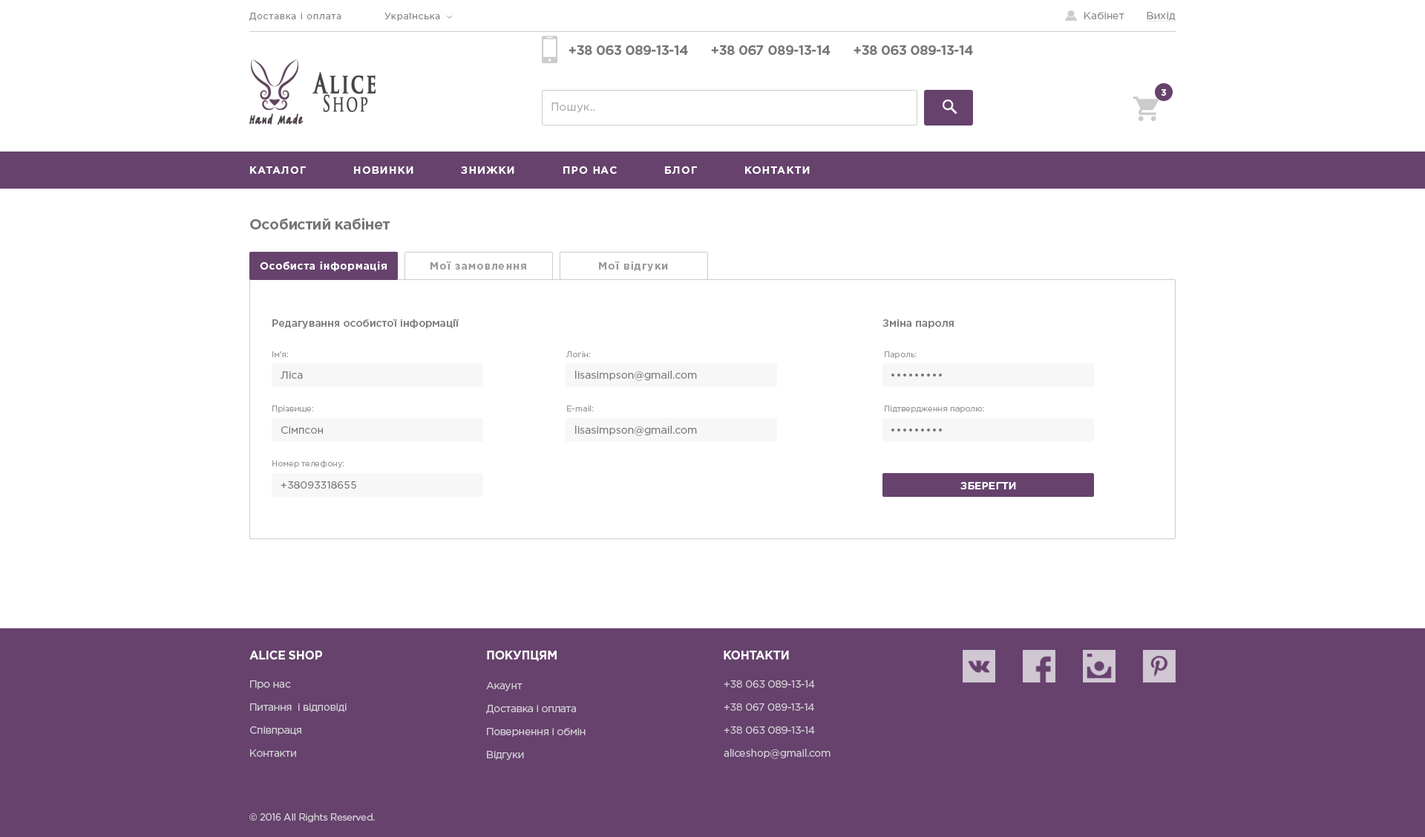
<style>
.page{position:relative;width:1425px;height:837px;background:#ffffff}
.page>*{position:absolute;margin:0}
.t1{font:8.9px "GothamPro";letter-spacing:0.075em;color:#888888}
.t2{font:10.4px "GothamPro";color:#888888}
.t3{font:10.4px "GothamPro";color:#888888;text-decoration:underline}
.t4{font:13.4px/18.6px "GothamPro-Bold";letter-spacing:-0.025em;color:#777777}
.t5{font:13.4px/18.6px "GothamPro";letter-spacing:-0.025em;color:#777777}
.t6{font:27.3px/18.2px "TrajanPro-Bold";letter-spacing:0.1em;color:#494249;font-weight:bold;scale:0.67 1}
.t7{font:21.9px/18.2px "TrajanPro-Regular";letter-spacing:0.1em;color:#494249;font-weight:bold;scale:0.67 1}
.t8{font:8.9px "GothamPro-Bold";letter-spacing:0.01em;color:#ffffff;text-transform:uppercase}
.t9{font:12.6px "TagirCTT";letter-spacing:0.1em;color:#463c45;font-weight:bold;scale:0.65 1}
.t10{font:11.1px "GothamPro";letter-spacing:0.01em;color:#aaaaaa}
.t11{font:10.4px "GothamPro-Bold";letter-spacing:0.075em;color:#ffffff;text-transform:uppercase}
.t12{font:14.8px "GothamPro-Bold";letter-spacing:-0.025em;color:#777777}
.t13{font:10.4px "GothamPro-Bold";letter-spacing:0.05em;color:#fffefe}
.t14{font:10.4px "GothamPro-Bold";letter-spacing:0.075em;color:#999999}
.t15{font:10.4px "GothamPro-Medium";color:#777777}
.t16{font:8.2px "GothamPro";color:#999999}
.t17{font:10.4px "GothamPro";color:#777777}
.t18{font:10.4px "GothamPro-Bold";color:#fefefe;text-transform:uppercase}
.t19{font:11.9px "GothamPro-Bold";letter-spacing:-0.025em;color:#fafafa;text-transform:uppercase}
.t20{font:10.4px/15.6px "GothamPro";letter-spacing:-0.025em;color:#d4ced6}
.t21{font:9.7px "GothamPro";letter-spacing:-0.025em;color:#d4ced6}
</style>
<div class="page">
<p class="t1" style="left:249px;top:13px;width:92px;height:8px">Доставка і оплата</p>
<p class="t1" style="left:385px;top:13px;width:55px;height:8px">Українська</p>
<p class="t2" style="left:1085px;top:12px;width:40px;height:7px">Кабінет</p>
<p class="t3" style="left:1146px;top:12px;width:30px;height:10px">Вихід</p>
<p class="t4" style="left:569px;top:45px;width:119px;height:10px">+38 063 089-13-14<span class="t5"> <br>е</span></p>
<p class="t4" style="left:711px;top:45px;width:120px;height:10px">+38 067 089-13-14<span class="t5"> <br>е</span></p>
<p class="t4" style="left:854px;top:45px;width:119px;height:10px">+38 063 089-13-14<span class="t5"> <br>е</span></p>
<p class="t6" style="left:313px;top:72px;width:63px;height:40px">Alice<br> <span class="t7">Shop</span></p>
<p class="t8" style="left:1161px;top:89px;width:6px;height:7px">3</p>
<p class="t9" style="left:249px;top:114px;width:54px;height:11px">Hand Made</p>
<p class="t10" style="left:552px;top:102px;width:43px;height:11px">Пошук..</p>
<p class="t11" style="left:250px;top:166px;width:56px;height:8px">каталог</p>
<p class="t11" style="left:354px;top:166px;width:59px;height:8px">Новинки</p>
<p class="t11" style="left:461px;top:166px;width:53px;height:8px">Знижки</p>
<p class="t11" style="left:563px;top:166px;width:54px;height:8px">Про нас</p>
<p class="t11" style="left:665px;top:166px;width:32px;height:8px">Блог</p>
<p class="t11" style="left:745px;top:166px;width:65px;height:8px">Контакти</p>
<p class="t12" style="left:250px;top:218px;width:140px;height:11px">Особистий кабінет</p>
<p class="t13" style="left:260px;top:261px;width:127px;height:10px">Особиста інформація</p>
<p class="t14" style="left:431px;top:261px;width:95px;height:8px">Мої замовлення</p>
<p class="t14" style="left:599px;top:261px;width:69px;height:10px">Мої відгуки</p>
<p class="t15" style="left:272px;top:319px;width:187px;height:10px">Редагування особистої інформації</p>
<p class="t15" style="left:883px;top:319px;width:71px;height:9px">Зміна пароля</p>
<p class="t16" style="left:272px;top:351px;width:16px;height:6px">Ім’я:</p>
<p class="t16" style="left:566px;top:351px;width:25px;height:6px">Логін:</p>
<p class="t16" style="left:885px;top:351px;width:32px;height:8px">Пароль:</p>
<p class="t17" style="left:281px;top:371px;width:22px;height:8px">Ліса</p>
<p class="t17" style="left:575px;top:370px;width:122px;height:11px">lisasimpson@gmail.com</p>
<p class="t16" style="left:272px;top:405px;width:41px;height:8px">Прізвище:</p>
<p class="t16" style="left:567px;top:405px;width:27px;height:6px">E-mail:</p>
<p class="t16" style="left:885px;top:405px;width:99px;height:8px">Підтвердження паролю:</p>
<p class="t17" style="left:575px;top:425px;width:122px;height:11px">lisasimpson@gmail.com</p>
<p class="t17" style="left:281px;top:426px;width:42px;height:8px">Сімпсон</p>
<p class="t16" style="left:272px;top:460px;width:72px;height:8px">Номер телефону:</p>
<p class="t17" style="left:281px;top:481px;width:75px;height:7px">+38093318655</p>
<p class="t18" style="left:961px;top:482px;width:55px;height:7px">Зберегти</p>
<p class="t19" style="left:249px;top:650px;width:73px;height:9px">Alice Shop</p>
<p class="t19" style="left:487px;top:650px;width:70px;height:11px">Покупцям</p>
<p class="t19" style="left:724px;top:650px;width:65px;height:9px">Контакти</p>
<p class="t20" style="left:250px;top:680px;width:97px;height:76px">Про нас<br>Питання  і відповіді<br>Співпраця<br>Контакти</p>
<p class="t20" style="left:486px;top:681px;width:100px;height:79px">Акаунт<br>Доставка і оплата<br>Повернення і обмін<br>Відгуки</p>
<p class="t20" style="left:724px;top:680px;width:107px;height:79px">+38 063 089-13-14 <br>+38 067 089-13-14 <br>+38 063 089-13-14 <br>aliceshop@gmail.com</p>
<p class="t21" style="left:249px;top:813px;width:126px;height:10px">© 2016 All Rights Reserved.</p>
</div>
